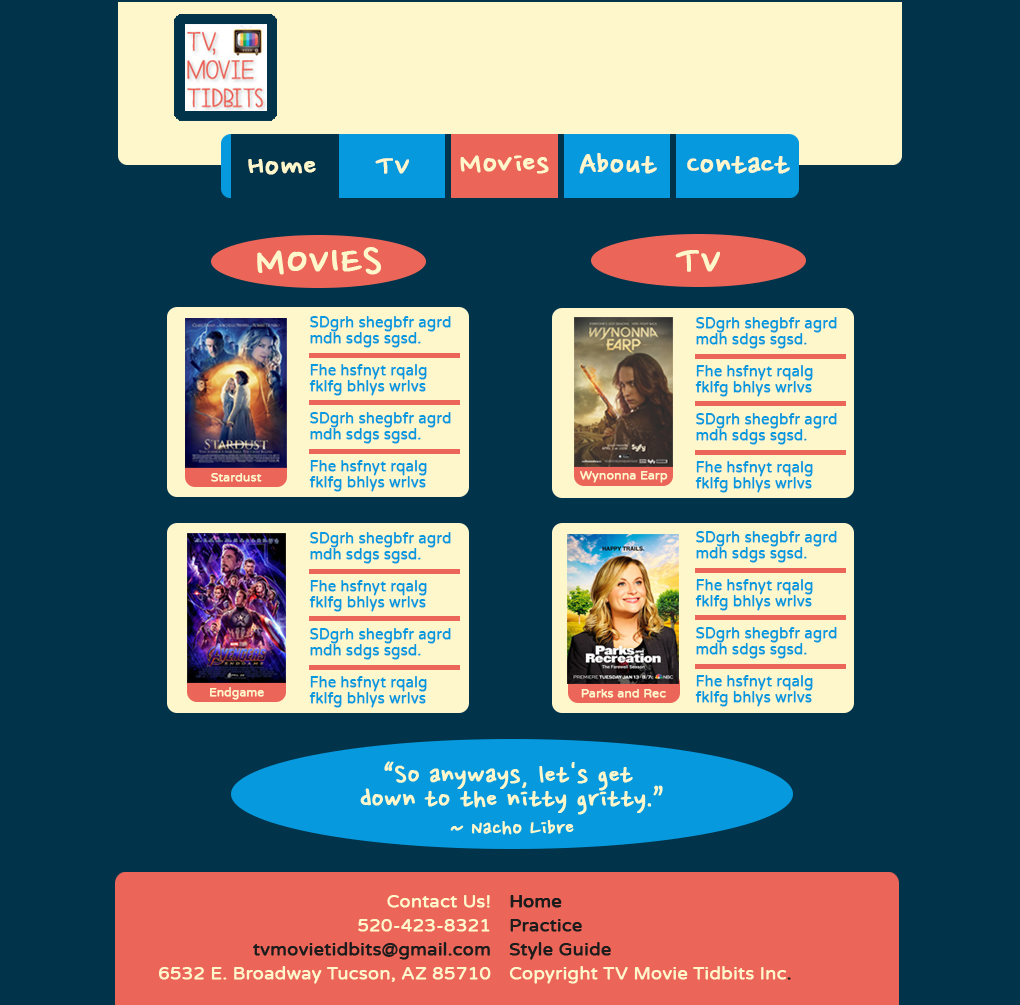
<style>
.page{position:relative;width:1020px;height:1005px;background:#01334a}
.page>*{position:absolute;margin:0}
.t1{font:34px "NanumPen";color:#fff7cc;font-weight:bold;scale:1.06 1}
.t2{font:14.3px/16px "VarelaRound-Regular";color:#0699dd;font-weight:bold}
.t3{font:11.9px "VarelaRound-Regular";color:#fff7cc;font-weight:bold}
.t4{font:18px "VarelaRound-Regular";color:#1c1c1c}
</style>
<div class="page">
<p class="t1" style="left:248px;top:159px;width:68px;height:16px">Home</p>
<p class="t1" style="left:375px;top:158px;width:34px;height:16px">TV</p>
<p class="t1" style="left:460px;top:155px;width:89px;height:19px">Movies</p>
<p class="t1" style="left:579px;top:153px;width:78px;height:21px">About</p>
<p class="t1" style="left:687px;top:156px;width:103px;height:18px">Contact</p>
<p class="t2" style="left:309px;top:316px;width:142px;height:80px">SDgrh shegbfr agrd mdh sdgs sgsd.<br><br>Fhe hsfnyt rqalg fklfg bhlys wrlvs swltyo.</p>
<p class="t2" style="left:695px;top:317px;width:142px;height:80px">SDgrh shegbfr agrd mdh sdgs sgsd.<br><br>Fhe hsfnyt rqalg fklfg bhlys wrlvs swltyo.</p>
<p class="t2" style="left:309px;top:412px;width:142px;height:80px">SDgrh shegbfr agrd mdh sdgs sgsd.<br><br>Fhe hsfnyt rqalg fklfg bhlys wrlvs swltyo.</p>
<p class="t2" style="left:695px;top:413px;width:142px;height:80px">SDgrh shegbfr agrd mdh sdgs sgsd.<br><br>Fhe hsfnyt rqalg fklfg bhlys wrlvs swltyo.</p>
<p class="t3" style="left:211px;top:473px;width:51px;height:9px">Stardust</p>
<p class="t3" style="left:580px;top:471px;width:88px;height:12px">Wynonna Earp</p>
<p class="t2" style="left:309px;top:532px;width:142px;height:80px">SDgrh shegbfr agrd mdh sdgs sgsd.<br><br>Fhe hsfnyt rqalg fklfg bhlys wrlvs swltyo.</p>
<p class="t2" style="left:695px;top:531px;width:142px;height:80px">SDgrh shegbfr agrd mdh sdgs sgsd.<br><br>Fhe hsfnyt rqalg fklfg bhlys wrlvs swltyo.</p>
<p class="t2" style="left:309px;top:628px;width:142px;height:80px">SDgrh shegbfr agrd mdh sdgs sgsd.<br><br>Fhe hsfnyt rqalg fklfg bhlys wrlvs swltyo.</p>
<p class="t2" style="left:695px;top:627px;width:142px;height:80px">SDgrh shegbfr agrd mdh sdgs sgsd.<br><br>Fhe hsfnyt rqalg fklfg bhlys wrlvs swltyo.</p>
<p class="t3" style="left:210px;top:687px;width:54px;height:13px">Endgame</p>
<p class="t3" style="left:581px;top:689px;width:85px;height:9px">Parks and Rec</p>
<p class="t4" style="left:511px;top:895px;width:50px;height:12px">Home</p>
</div>
